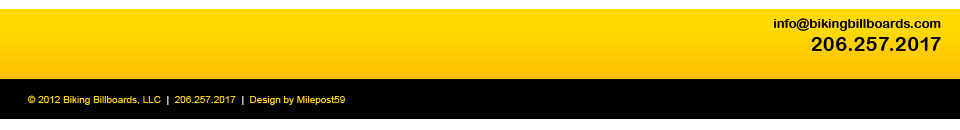
<style>
.page{position:relative;width:960px;height:130px;background:#000000}
.page>*{position:absolute;margin:0}
.t1{font:13px "ArialRoundedMTBold";color:#000000}
.t2{font:20.3px "ArialRoundedMTBold";color:#000000}
.t3{font:10px "ArialMT";color:#ffd204}
.t4{font:10px "ArialMT";color:#ffffff}
</style>
<div class="page">
<p class="t1" style="left:774px;top:18px;width:167px;height:13px">info@bikingbillboards.com</p>
<p class="t2" style="left:811px;top:37px;width:130px;height:14px">206.257.2017</p>
<p class="t3" style="left:27px;top:95px;width:318px;height:10px">© 2012 Biking Billboards, LLC  <span class="t4">|  </span>206.257.2017  <span class="t4">| </span> Design by Milepost59</p>
</div>
